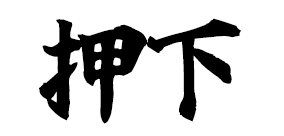
<style>
.page{position:relative;width:284px;height:136px;background:#ffffff}
.page>*{position:absolute;margin:0}
.t1{font:100px "Tamanegi-Kaisho-Geki-FreeVer-7";color:#000000}
</style>
<div class="page">
<p class="t1" style="left:39px;top:18px;width:202px;height:106px">押下</p>
</div>
